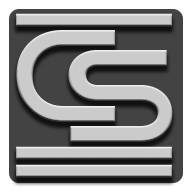
<style>
.page{position:relative;width:192px;height:192px;background:#cbcbcb}
.page>*{position:absolute;margin:0}
.t1{font:135.3px "GoodTimes";letter-spacing:-0.02em;color:#000000}
</style>
<div class="page">
<p class="t1" style="left:16px;top:30px;width:100px;height:92px">C</p>
<p class="t1" style="left:68px;top:50px;width:105px;height:92px">S</p>
</div>
